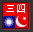
<style>
.page{position:relative;width:33px;height:32px;background:#f20000}
.page>*{position:absolute;margin:0}
.t1{font:10.4px "SimSun";color:#ffffff}
</style>
<div class="page">
<p class="t1" style="left:6px;top:4px;width:19px;height:9px">三四</p>
</div>
